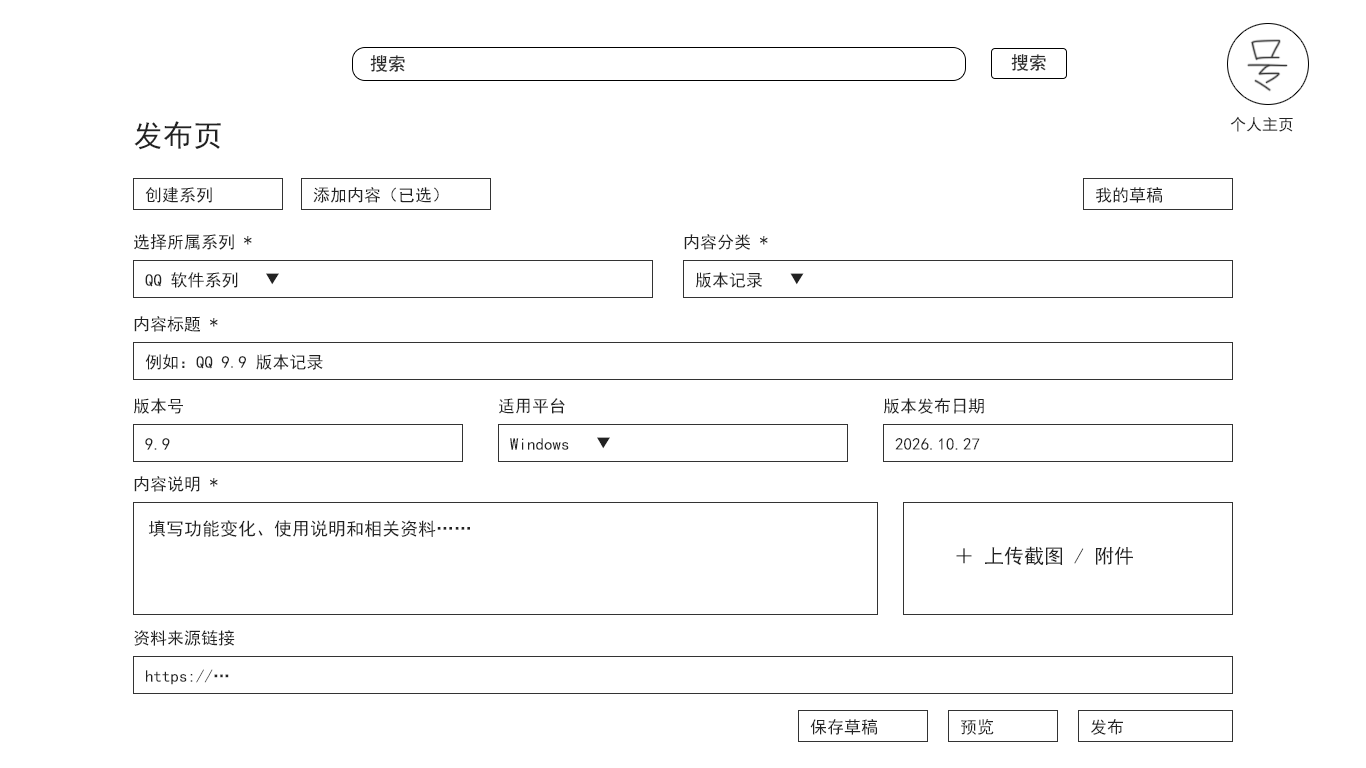
<style>
.page{position:relative;width:1366px;height:768px;background:#ffffff}
.page>*{position:absolute;margin:0}
.t1{font:18px "SimHei";color:#282828}
.t2{font:30px "SimHei";color:#222222}
.t3{font:16px "SimHei";color:#222222}
.t4{font:17px "SimHei";color:#222222}
.t5{font:18px "SimHei";color:#222222}
.t6{font:20px "SimHei";color:#222222}
</style>
<div class="page">
<p class="t1" style="left:1011px;top:54px;width:35px;height:17px">搜索</p>
<p class="t1" style="left:370px;top:55px;width:35px;height:17px">搜索</p>
<p class="t2" style="left:134px;top:121px;width:87px;height:29px">发布页</p>
<p class="t3" style="left:1230px;top:116px;width:63px;height:16px">个人主页</p>
<p class="t4" style="left:145px;top:187px;width:67px;height:16px">创建系列</p>
<p class="t4" style="left:313px;top:187px;width:126px;height:16px">添加内容（已选）</p>
<p class="t4" style="left:1096px;top:187px;width:66px;height:16px">我的草稿</p>
<p class="t4" style="left:134px;top:234px;width:118px;height:16px">选择所属系列 *</p>
<p class="t4" style="left:684px;top:234px;width:84px;height:16px">内容分类 *</p>
<p class="t4" style="left:145px;top:272px;width:134px;height:16px">QQ 软件系列   ▼</p>
<p class="t4" style="left:696px;top:272px;width:108px;height:16px">版本记录   ▼</p>
<p class="t4" style="left:134px;top:316px;width:84px;height:16px">内容标题 *</p>
<p class="t4" style="left:145px;top:354px;width:178px;height:16px">例如：QQ 9.9 版本记录</p>
<p class="t4" style="left:134px;top:398px;width:49px;height:16px">版本号</p>
<p class="t4" style="left:499px;top:398px;width:66px;height:16px">适用平台</p>
<p class="t4" style="left:884px;top:398px;width:100px;height:16px">版本发布日期</p>
<p class="t4" style="left:145px;top:438px;width:25px;height:12px">9.9</p>
<p class="t4" style="left:510px;top:437px;width:100px;height:13px">Windows   ▼</p>
<p class="t4" style="left:895px;top:438px;width:85px;height:12px">2026.10.27</p>
<p class="t4" style="left:134px;top:476px;width:84px;height:16px">内容说明 *</p>
<p class="t5" style="left:148px;top:520px;width:322px;height:17px">填写功能变化、使用说明和相关资料……</p>
<p class="t6" style="left:956px;top:546px;width:177px;height:19px">＋ 上传截图 / 附件</p>
<p class="t4" style="left:134px;top:630px;width:101px;height:16px">资料来源链接</p>
<p class="t4" style="left:146px;top:669px;width:83px;height:16px">https://…</p>
<p class="t4" style="left:810px;top:719px;width:67px;height:16px">保存草稿</p>
<p class="t4" style="left:961px;top:719px;width:33px;height:16px">预览</p>
<p class="t4" style="left:1091px;top:719px;width:32px;height:16px">发布</p>
</div>
